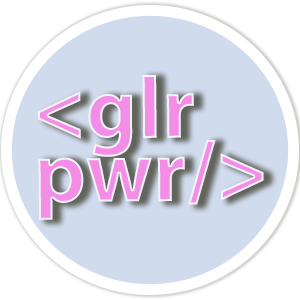
<style>
.page{position:relative;width:300px;height:300px;background:#d0dbee}
.page>*{position:absolute;margin:0}
.t1{font:152.1px/63.4px "MyriadPro-Bold"}
</style>
<div class="page">
<p class="t1" style="left:38px;top:74px;width:226px;height:146px;rotate:-1deg">&lt;glr<br>pwr/&gt;</p>
</div>
